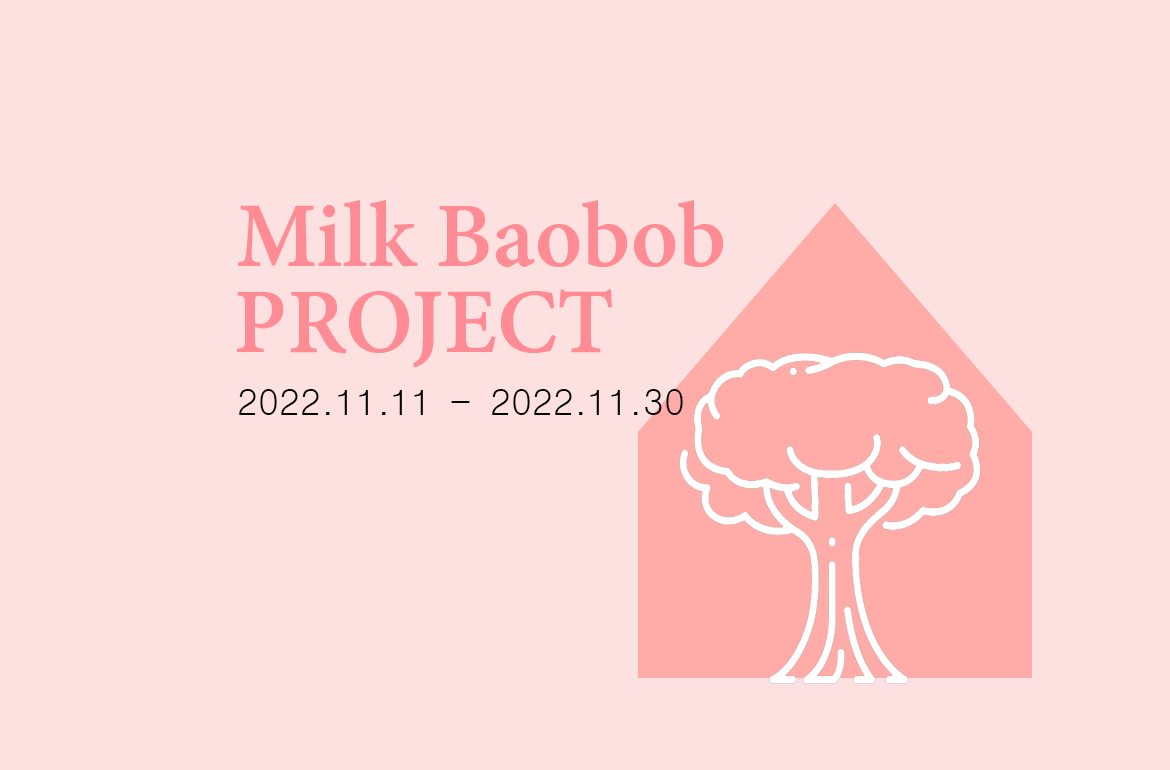
<style>
.page{position:relative;width:1170px;height:770px;background:#fde1e1}
.page>*{position:absolute;margin:0}
.t1{font:100px "AdobeDevanagari-Bold";color:#ff8b94}
.t2{font:36px "Dotum";color:#050404}
</style>
<div class="page">
<p class="t1" style="left:238px;top:200px;width:485px;height:67px">Milk Baobob</p>
<p class="t1" style="left:237px;top:289px;width:375px;height:79px">PROJECT</p>
<p class="t2" style="left:239px;top:389px;width:444px;height:26px">2022.11.11 - 2022.11.30</p>
</div>
